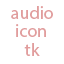
<style>
.page{position:relative;width:64px;height:64px;background:#ffffff}
.page>*{position:absolute;margin:0}
.t1{font:18px "MyriadPro-Regular";color:#e19d9d}
</style>
<div class="page">
<p class="t1" style="left:11px;top:6px;width:42px;height:13px">audio</p>
<p class="t1" style="left:16px;top:24px;width:30px;height:13px">icon</p>
<p class="t1" style="left:24px;top:43px;width:16px;height:13px">tk</p>
</div>
